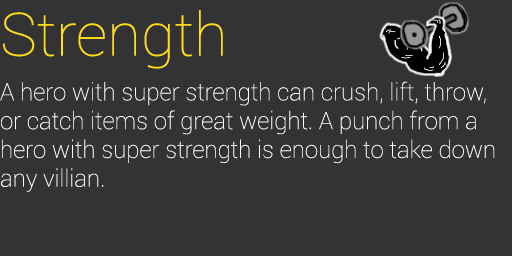
<style>
.page{position:relative;width:512px;height:256px;background:#333333}
.page>*{position:absolute;margin:0}
.t1{font:60px "Roboto-Thin";color:#ffdd17;scale:1.03 1}
.t2{font:24px "Roboto-Thin";color:#ffffff}
</style>
<div class="page">
<p class="t1" style="left:3px;top:10px;width:220px;height:59px">Strength</p>
<p class="t2" style="left:0px;top:81px;width:495px;height:111px">A hero with super strength can crush, lift, throw, or catch items of great weight. A punch from a hero with super strength is enough to take down any villian.</p>
</div>
